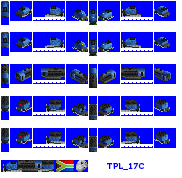
<style>
.page{position:relative;width:182px;height:178px;background:#ffffff}
.page>*{position:absolute;margin:0}
.t1{font:8px "Museo700-Regular";letter-spacing:0.075em;color:#0000ff;text-transform:uppercase}
</style>
<div class="page">
<p class="t1" style="left:107px;top:163px;width:38px;height:7px">TPL_17c</p>
</div>
